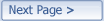
<style>
.page{position:relative;width:104px;height:21px}
.page>*{position:absolute;margin:0}
.t1{font:12px "Tahoma";color:#3d5f95}
.t2{font:12px "Tahoma";color:#3d5f95;font-weight:bold}
</style>
<div class="page">
<p class="t1" style="left:9px;top:5px;width:65px;height:12px">Next Page <span class="t2">&gt;</span></p>
</div>
